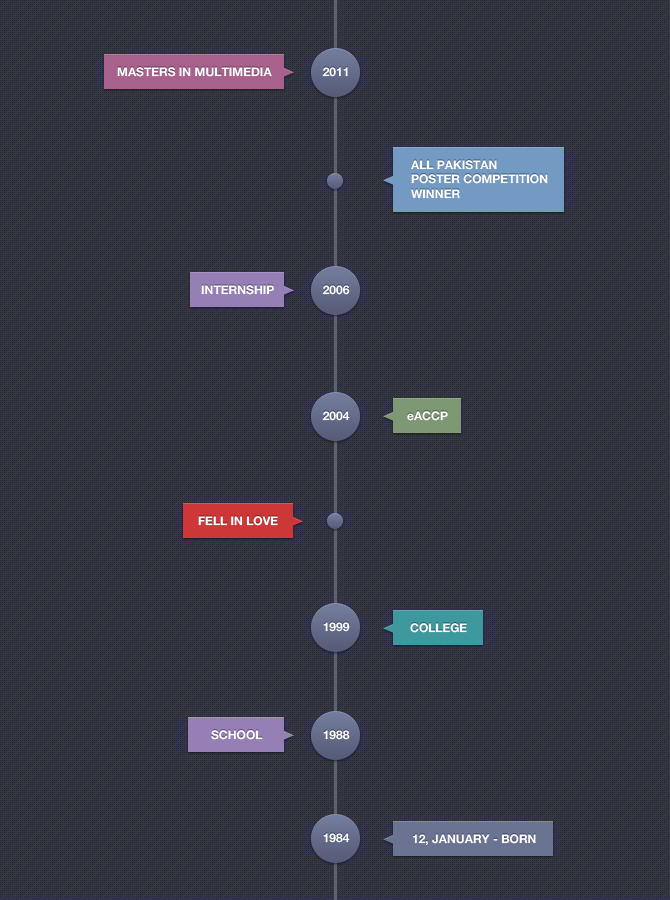
<style>
.page{position:relative;width:670px;height:900px;background:#323355}
.page>*{position:absolute;margin:0}
.t1{font:12px "HelveticaNeue-Bold";color:#ffffff}
</style>
<div class="page">
<p class="t1" style="left:117px;top:67px;width:155px;height:10px">MASTERS IN MULTIMEDIA</p>
<p class="t1" style="left:322px;top:67px;width:26px;height:10px">2011</p>
<p class="t1" style="left:411px;top:160px;width:137px;height:39px">ALL PAKISTAN<br>POSTER COMPETITION<br>WINNER</p>
<p class="t1" style="left:201px;top:285px;width:73px;height:10px">INTERNSHIP</p>
<p class="t1" style="left:322px;top:285px;width:28px;height:10px">2006</p>
<p class="t1" style="left:322px;top:411px;width:28px;height:10px">2004</p>
<p class="t1" style="left:407px;top:411px;width:41px;height:10px">eACCP</p>
<p class="t1" style="left:198px;top:516px;width:80px;height:10px">FELL IN LOVE</p>
<p class="t1" style="left:323px;top:622px;width:27px;height:10px">1999</p>
<p class="t1" style="left:410px;top:623px;width:57px;height:10px">COLLEGE</p>
<p class="t1" style="left:211px;top:730px;width:52px;height:10px">SCHOOL</p>
<p class="t1" style="left:323px;top:730px;width:27px;height:10px">1988</p>
<p class="t1" style="left:323px;top:833px;width:27px;height:10px">1984</p>
<p class="t1" style="left:413px;top:834px;width:123px;height:11px">12, JANUARY - BORN</p>
</div>
